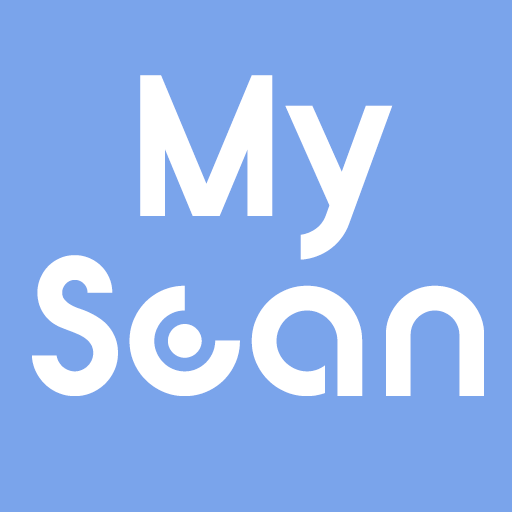
<style>
.page{position:relative;width:512px;height:512px;background:#7aa4eb}
.page>*{position:absolute;margin:0}
.t1{font:150px "digitalgeometric-Bold";color:#ffffff}
</style>
<div class="page">
<p class="t1" style="left:32px;top:75px;width:452px;height:321px;text-align:center">My<br>Scan</p>
</div>
